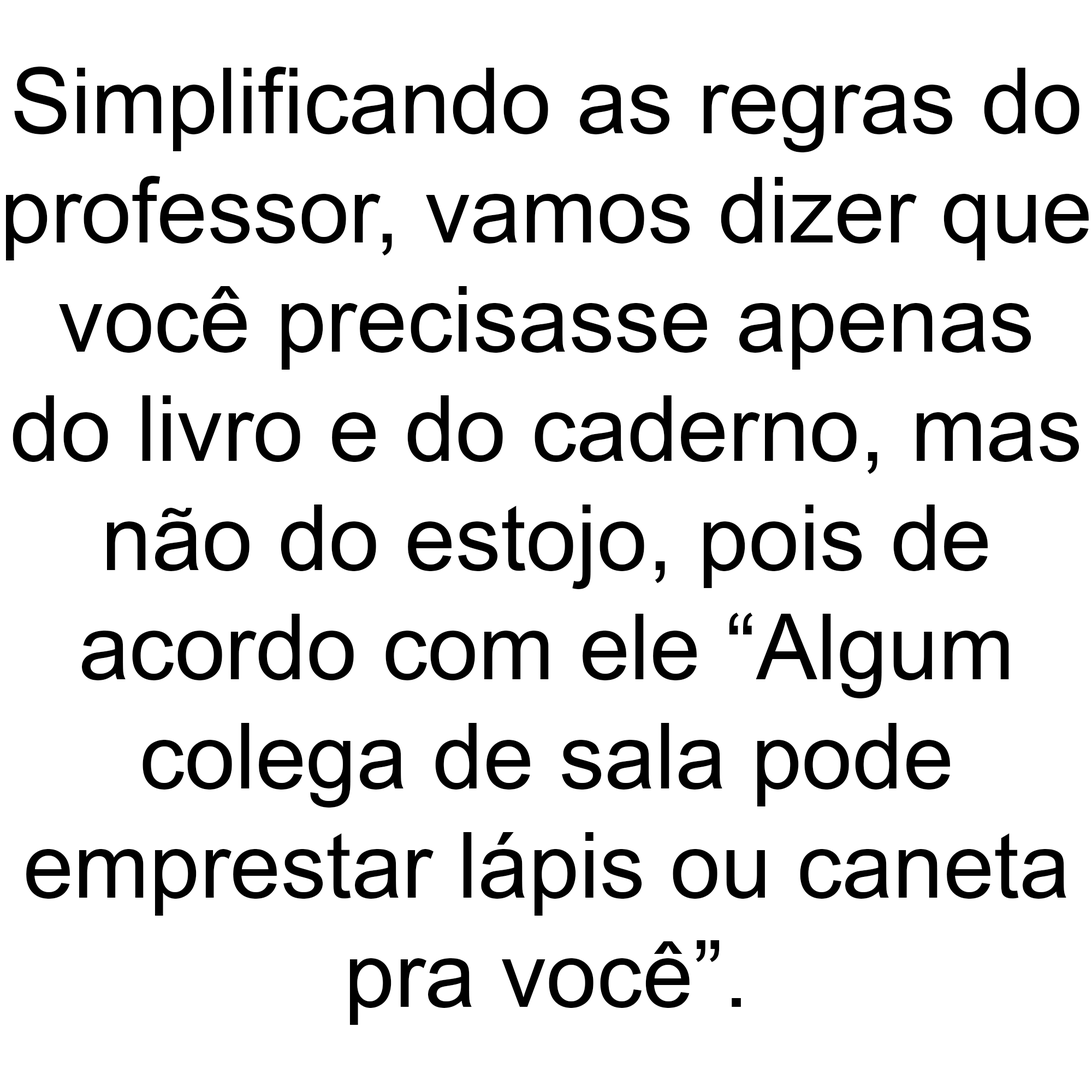
<style>
.page{position:relative;width:1092px;height:1092px;background:#ffffff}
.page>*{position:absolute;margin:0}
.t1{font:91px "ArialMT";color:#000000}
</style>
<div class="page">
<p class="t1" style="left:5px;top:67px;width:1084px;height:958px;text-align:center">Simplificando as regras do<br>professor, vamos dizer que<br>você precisasse apenas<br>do livro e do caderno, mas<br>não do estojo, pois de<br>acordo com ele “Algum<br>colega de sala pode<br>emprestar lápis ou caneta<br>pra você”.</p>
</div>
